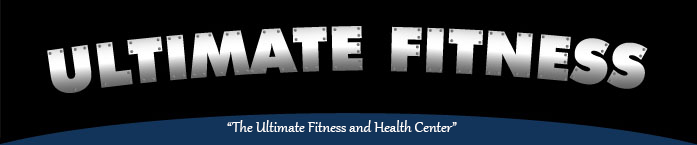
<style>
.page{position:relative;width:697px;height:145px;background:#000000}
.page>*{position:absolute;margin:0}
.t1{font:18px "Gabriola";color:#ffffff}
</style>
<div class="page">
<p class="t1" style="left:227px;top:120px;width:230px;height:12px">“The Ultimate Fitness and Health Center”</p>
</div>
